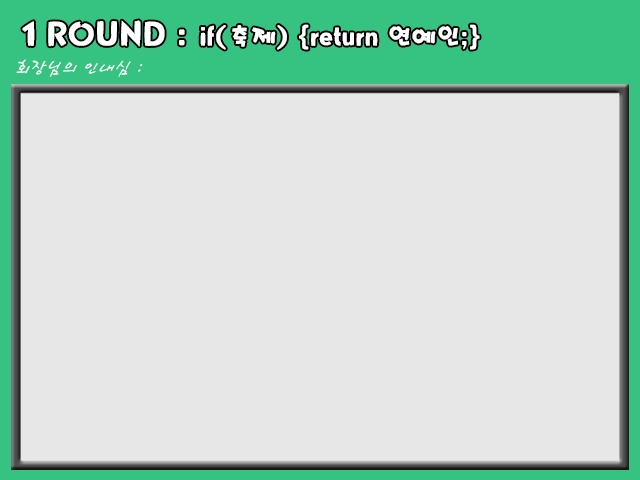
<style>
.page{position:relative;width:640px;height:480px;background:#e7e7e7}
.page>*{position:absolute;margin:0}
.t1{font:24px "Mpop";color:#ffffff}
.t2{font:30px "Mpop";color:#ffffff}
.t3{font:24px "HaanCjaL";color:#ffffff}
</style>
<div class="page">
<p class="t1" style="left:22px;top:20px;width:458px;height:30px"><span class="t2">1 ROUND : </span>if(축제) {return 연예인;}</p>
<p class="t3" style="left:16px;top:59px;width:127px;height:18px">회장님의 인내심 :</p>
</div>
